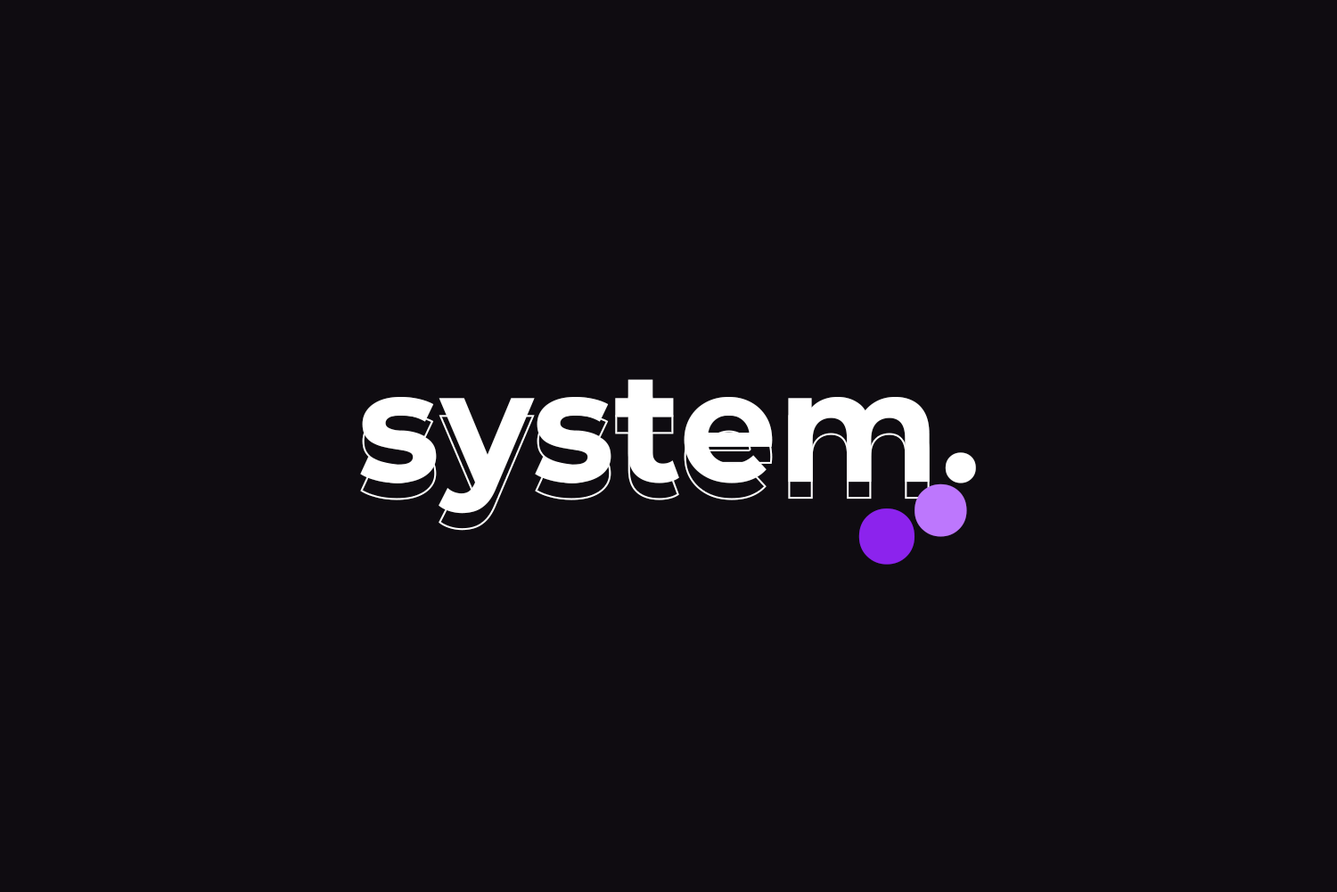
<style>
.page{position:relative;width:1337px;height:892px;background:#0f0c11}
.page>*{position:absolute;margin:0}
.t1{font:155.4px "Montserrat-Bold";color:#ffffff}
.t2{font:267.5px "Montserrat-Bold";color:#bd77fd}
.t3{font:285.5px "Montserrat-Bold";color:#8c23ed}
</style>
<div class="page">
<p class="t1" style="left:360px;top:379px;width:616px;height:135px">system.</p>
<p class="t2" style="left:915px;top:483px;width:52px;height:54px">.</p>
<p class="t3" style="left:859px;top:508px;width:56px;height:56px">.</p>
</div>
